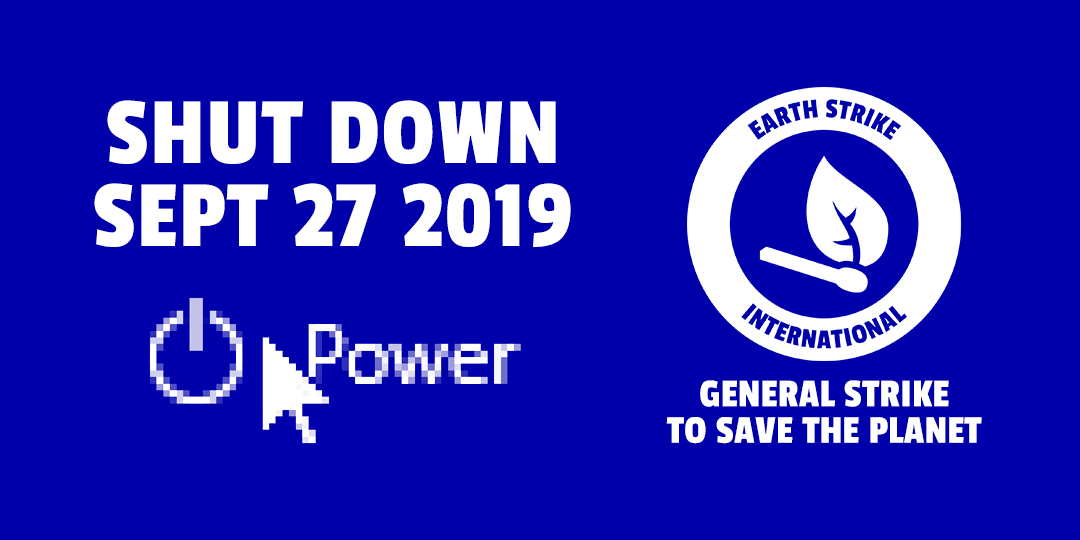
<style>
.page{position:relative;width:1080px;height:540px;background:#0000aa}
.page>*{position:absolute;margin:0}
.t1{font:99px/83px "PassionOne-Regular";letter-spacing:0.02em;color:#ffffff;text-transform:uppercase}
.t2{font:41px/36.6px "PassionOne-Regular";letter-spacing:0.01em;color:#ffffff}
</style>
<div class="page">
<p class="t1" style="left:94px;top:100px;width:477px;height:147px;text-align:center">shut down<br>sept 27 2019</p>
<p class="t2" style="left:666px;top:380px;width:316px;height:64px;text-align:center">GENERAL STRIKE<br>TO SAVE THE PLANET</p>
</div>
